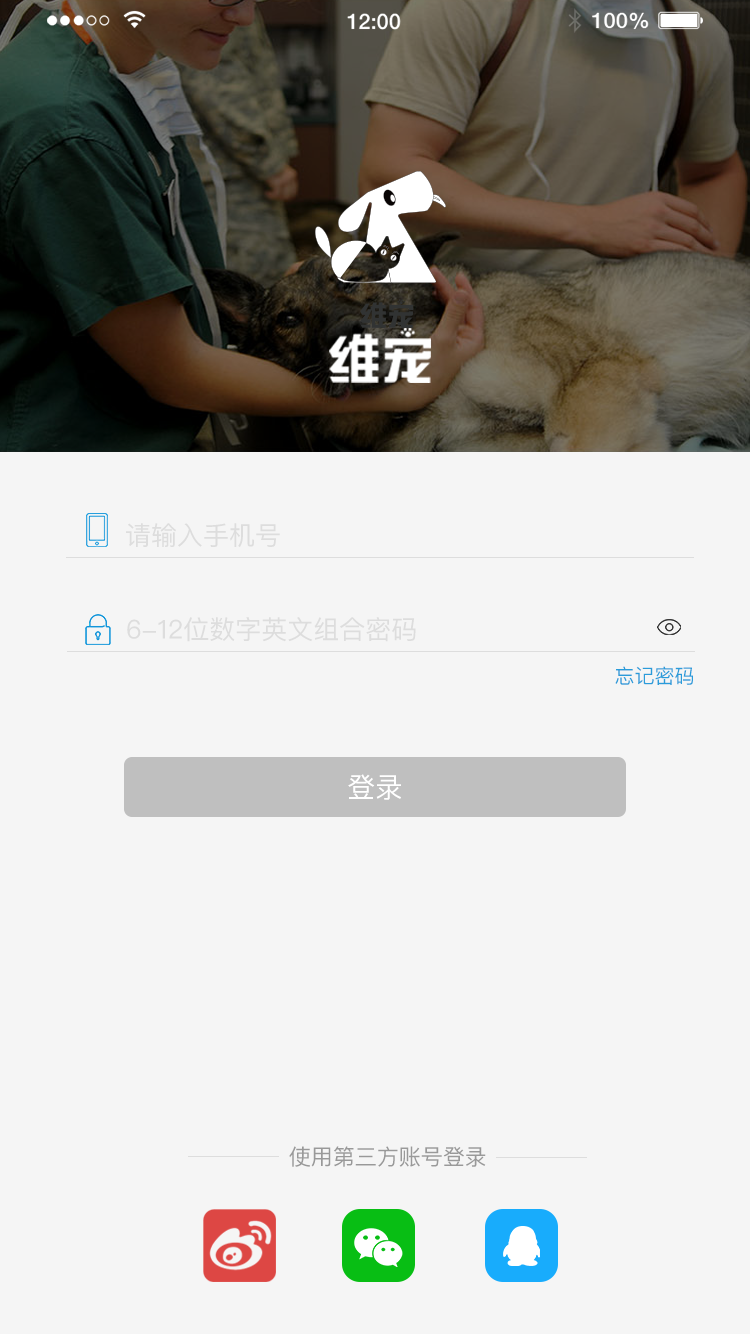
<style>
.page{position:relative;width:750px;height:1334px;background:#f5f5f5}
.page>*{position:absolute;margin:0}
.t1{font:26px "PingFangSC-Regular";color:#dddddd}
.t2{font:20px "PingFangSC-Regular";color:#2a9cda}
.t3{font:28px "PingFangSC-Regular";color:#ffffff}
.t4{font:22px "PingFangSC-Regular";color:#999999}
</style>
<div class="page">
<p class="t1" style="left:126px;top:523px;width:154px;height:25px">请输入手机号</p>
<p class="t1" style="left:127px;top:617px;width:289px;height:25px">6-12位数字英文组合密码</p>
<p class="t2" style="left:615px;top:666px;width:78px;height:19px">忘记密码</p>
<p class="t3" style="left:348px;top:774px;width:53px;height:26px">登录</p>
<p class="t4" style="left:289px;top:1146px;width:197px;height:21px">使用第三方账号登录</p>
</div>
